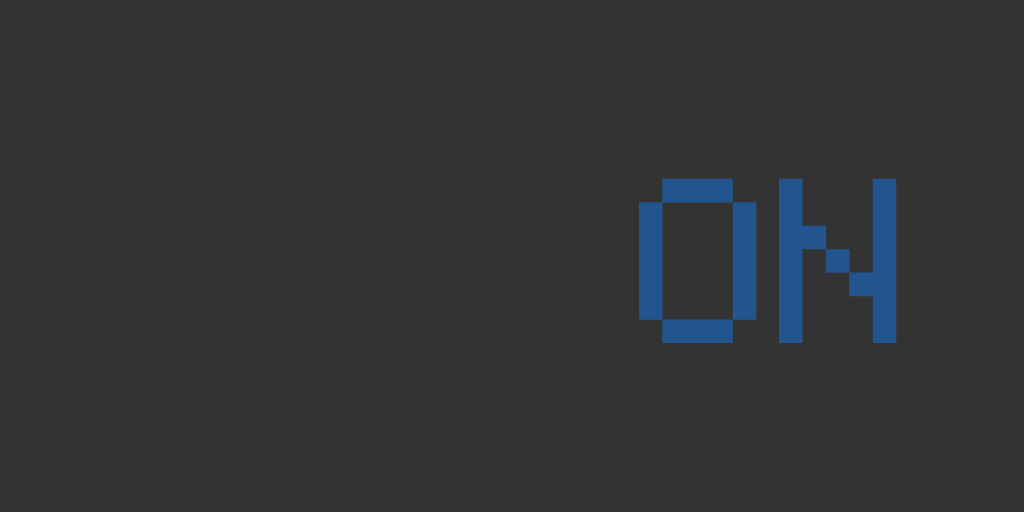
<style>
.page{position:relative;width:1024px;height:512px;background:#333333}
.page>*{position:absolute;margin:0}
.t1{font:375px "monogramextended";color:#22548d}
</style>
<div class="page">
<p class="t1" style="left:639px;top:178px;width:258px;height:165px">ON</p>
</div>
